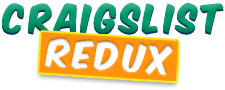
<style>
.page{position:relative;width:225px;height:90px;background:#ffffff}
.page>*{position:absolute;margin:0}
.t1{font:32.8px "KomikaAxis";letter-spacing:0.1em;color:#00996d}
.t2{font:32.8px "KomikaAxis";letter-spacing:0.1em;color:#ffffff}
</style>
<div class="page">
<p class="t1" style="left:2px;top:3px;width:222px;height:30px">CRAIGSLIST</p>
<p class="t2" style="left:45px;top:38px;width:128px;height:37px;rotate:4deg">REDUX</p>
</div>
